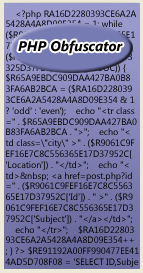
<style>
.page{position:relative;width:143px;height:273px}
.page>*{position:absolute;margin:0}
.t1{font:9px "SegoeUI";color:#000000}
.t2{font:14px "SegoeUI-BoldItalic";color:#000000}
</style>
<div class="page">
<p class="t1" style="left:5px;top:10px;width:134px;height:257px">&lt;?php RA16D2280393CE6A2A<br>5428A4A8D09E354 = 1; while <br>($R9061C9FEF16E7C8C556365E1<br>7D37952C = mysql_fetch_array<br>($R679E9B9234E2062F809DBD3<br>325D37FB6, MYSQL_ASSOC)) { <br>$R65A9EBDC909DAA427BA0B8<br>3FA6AB2BCA = ($RA16D228039<br>3CE6A2A5428A4A8D09E354 &amp; 1<br>? 'odd' : 'even');    echo "&lt;tr class<br>=" . $R65A9EBDC909DAA427BA0<br>B83FA6AB2BCA . "&gt;";    echo "&lt;<br>td class=\"city\" &gt;" . ($R9061C9F<br>EF16E7C8C556365E17D37952C[<br>'Location']) . "&lt;/td&gt;";    echo "&lt;<br>td&gt;&amp;nbsp; &lt;a href=post.php?id<br>=" . ($R9061C9FEF16E7C8C5563<br>65E17D37952C['Id']) . " &gt;" . ($R9<br>061C9FEF16E7C8C556365E17D3<br>7952C['Subject']) . "&lt;/a&gt;&lt;/td&gt;";<br>    echo "&lt;/tr&gt;";    $RA16D22803<br>93CE6A2A5428A4A8D09E354++<br>; } ?&gt; $RE91192A00FF990477EE41<br>4AD5D708F08 = 'SELECT ID,Subje</p>
<p class="t2" style="left:18px;top:40px;width:105px;height:14px">PHP Obfuscator</p>
</div>
